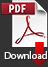
<style>
.page{position:relative;width:48px;height:67px;background:#333333}
.page>*{position:absolute;margin:0}
.t1{font:10px "MyriadPro-Regular";color:#fefefe}
</style>
<div class="page">
<p class="t1" style="left:4px;top:51px;width:43px;height:8px">Download</p>
</div>
